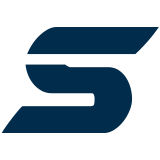
<style>
.page{position:relative;width:160px;height:160px;background:#ffffff}
.page>*{position:absolute;margin:0}
.t1{font:200px "AirstrikeLaser";color:#022c4c}
</style>
<div class="page">
<p class="t1" style="left:1px;top:27px;width:158px;height:106px">S</p>
</div>
